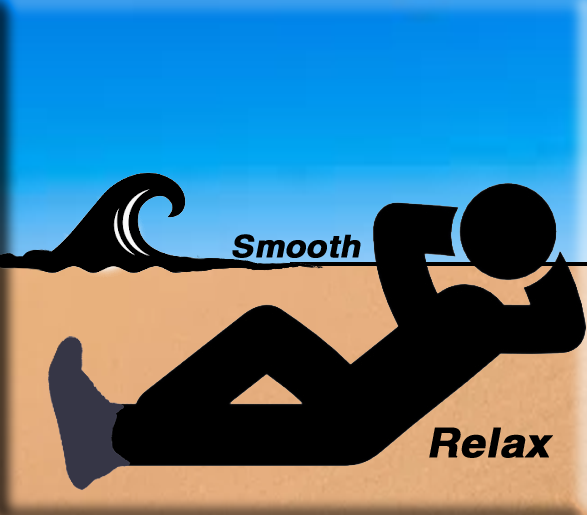
<style>
.page{position:relative;width:587px;height:515px;background:#000000}
.page>*{position:absolute;margin:0}
.t1{font:31px "HelveticaLTStd-Bold";color:#000000;font-weight:bold;font-style:italic;scale:1.08 1}
.t2{font:40.9px "HelveticaLTStd-Bold";color:#000000;font-weight:bold;font-style:italic;scale:1.08 1}
</style>
<div class="page">
<p class="t1" style="left:232px;top:234px;width:129px;height:24px">Smooth</p>
<p class="t2" style="left:429px;top:427px;width:124px;height:31px">Relax</p>
</div>
